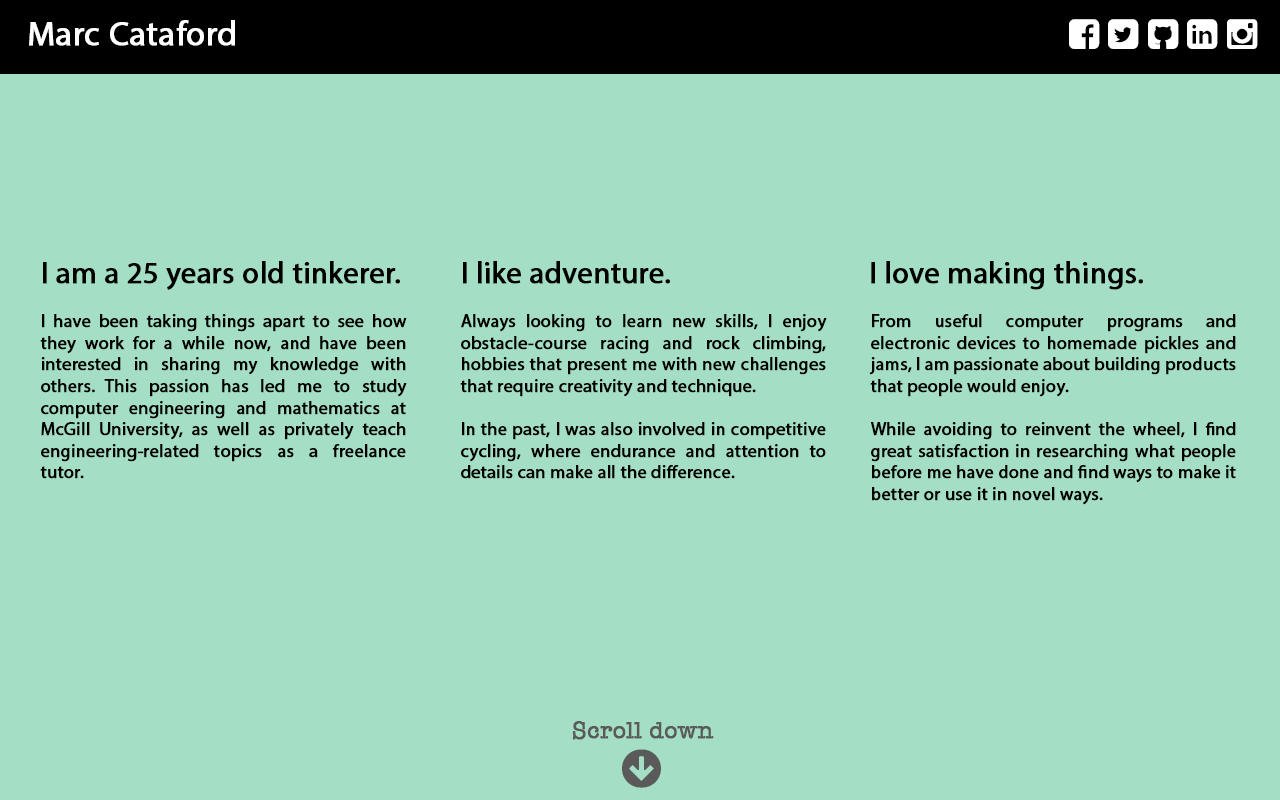
<style>
.page{position:relative;width:1280px;height:800px;background:#a4dec4}
.page>*{position:absolute;margin:0}
.t1{font:34px "MyriadPro-Regular";color:#ffffff;font-weight:bold}
.t2{font:30px "MyriadPro-Regular";color:#000000;font-weight:bold}
.t3{font:18px "MyriadPro-Regular";color:#000000;font-weight:bold}
.t4{font:24px "AmericanTypewriter";color:#5a5a5a;font-weight:bold}
</style>
<div class="page">
<p class="t1" style="left:29px;top:20px;width:206px;height:26px">Marc Cataford</p>
<p class="t2" style="left:43px;top:261px;width:357px;height:29px">I am a 25 years old tinkerer.</p>
<p class="t2" style="left:463px;top:261px;width:207px;height:23px">I like adventure.</p>
<p class="t2" style="left:871px;top:261px;width:272px;height:29px">I love making things.</p>
<p class="t3" style="left:40px;top:314px;width:367px;height:165px;text-align:justify">I have been taking things apart to see how they work for a while now, and have been interested in sharing my knowledge with others. This passion has led me to study computer engineering and mathematics at McGill University, as well as privately teach engineering-related topics as a freelance tutor.</p>
<p class="t3" style="left:460px;top:314px;width:367px;height:165px;text-align:justify">Always looking to learn new skills, I enjoy obstacle-course racing and rock climbing, hobbies that present me with new challenges that require creativity and technique.<br><br>In the past, I was also involved in competitive cycling, where endurance and attention to details can make all the difference.</p>
<p class="t3" style="left:869px;top:314px;width:367px;height:191px;text-align:justify">From useful computer programs and electronic devices to homemade pickles and jams, I am passionate about building products that people would enjoy.<br><br>While avoiding to reinvent the wheel, I find great satisfaction in researching what people before me have done and find ways to make it better or use it in novel ways.</p>
<p class="t4" style="left:572px;top:721px;width:142px;height:19px">Scroll down</p>
</div>
